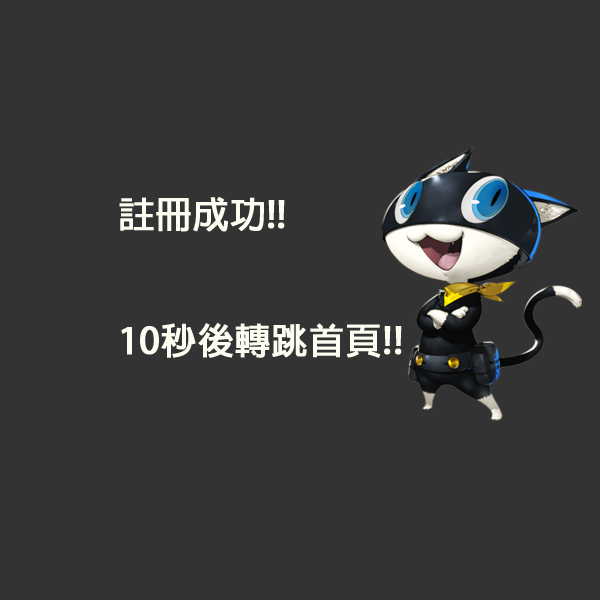
<style>
.page{position:relative;width:600px;height:600px;background:#333333}
.page>*{position:absolute;margin:0}
.t1{font:36px "AdobeFanHeitiStd-Bold";color:#fbfdf1;font-weight:bold}
</style>
<div class="page">
<p class="t1" style="left:119px;top:197px;width:283px;height:161px">註冊成功!!<br><br>10秒後轉跳首頁!!</p>
</div>
